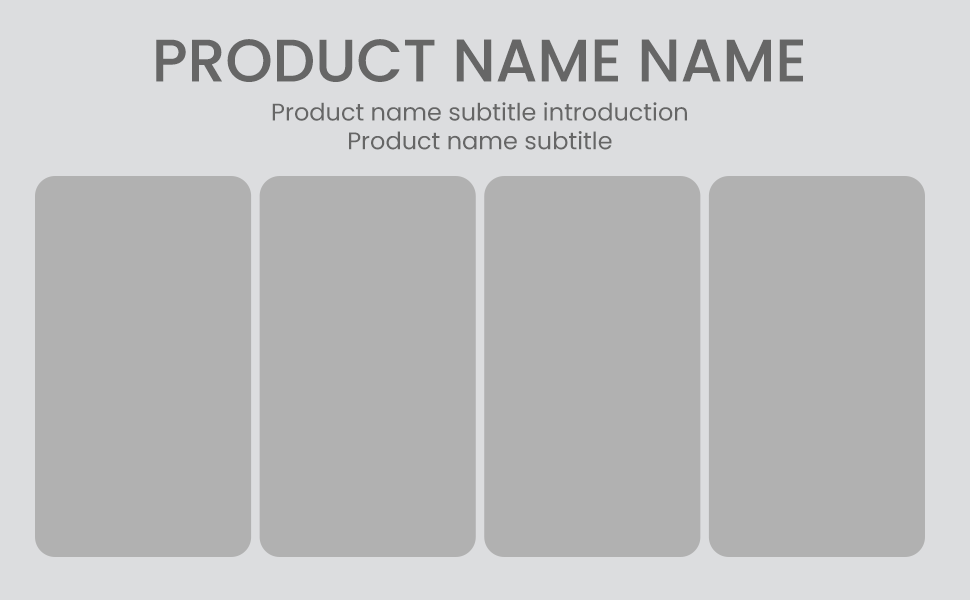
<style>
.page{position:relative;width:970px;height:600px;background:#b1b1b1}
.page>*{position:absolute;margin:0}
.t1{font:60px "Poppins-Medium";color:#666666}
.t2{font:24px "Poppins-Regular";color:#666666}
</style>
<div class="page">
<p class="t1" style="left:156px;top:39px;width:647px;height:43px">PRODUCT NAME NAME</p>
<p class="t2" style="left:272px;top:102px;width:415px;height:48px;text-align:center">Product name subtitle introduction<br>Product name subtitle</p>
</div>
